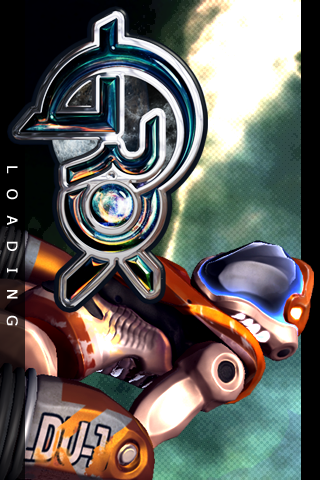
<style>
.page{position:relative;width:320px;height:480px}
.page>*{position:absolute;margin:0}
.t1{font:14px "Verdana";letter-spacing:1.1em;color:#ffffff;font-weight:bold}
</style>
<div class="page">
<p class="t1" style="left:6px;top:166px;width:12px;height:160px;rotate:90deg">LOADING</p>
</div>
